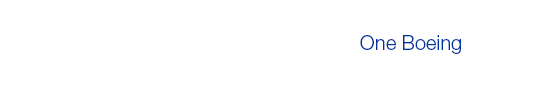
<style>
.page{position:relative;width:560px;height:90px;background:#ffffff}
.page>*{position:absolute;margin:0}
.t1{font:20px "HelveticaNeue-Light";color:#0033a1}
</style>
<div class="page">
<p class="t1" style="left:360px;top:35px;width:101px;height:19px">One Boeing</p>
</div>
